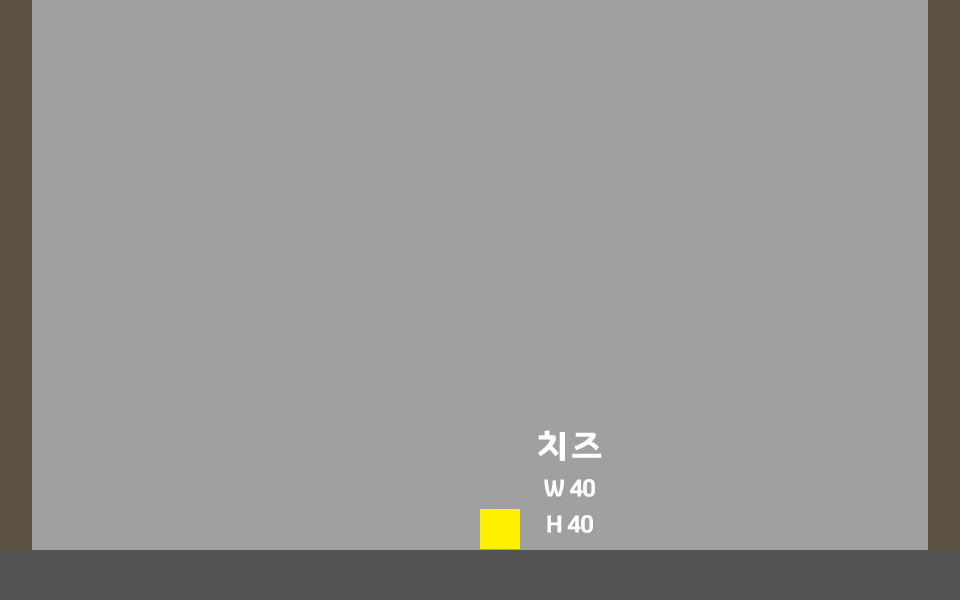
<style>
.page{position:relative;width:960px;height:600px;background:#a0a0a0}
.page>*{position:absolute;margin:0}
.t1{font:24px/36px "GyeonggiTitleV";letter-spacing:-0.05em;color:#ffffff}
.t2{font:36px/12px "GyeonggiTitleV";letter-spacing:-0.05em;color:#ffffff}
</style>
<div class="page">
<p class="t1" style="left:538px;top:430px;width:64px;height:103px;text-align:center"><span class="t2">치즈<br><br><br><br></span>W 40<br>H 40</p>
</div>
